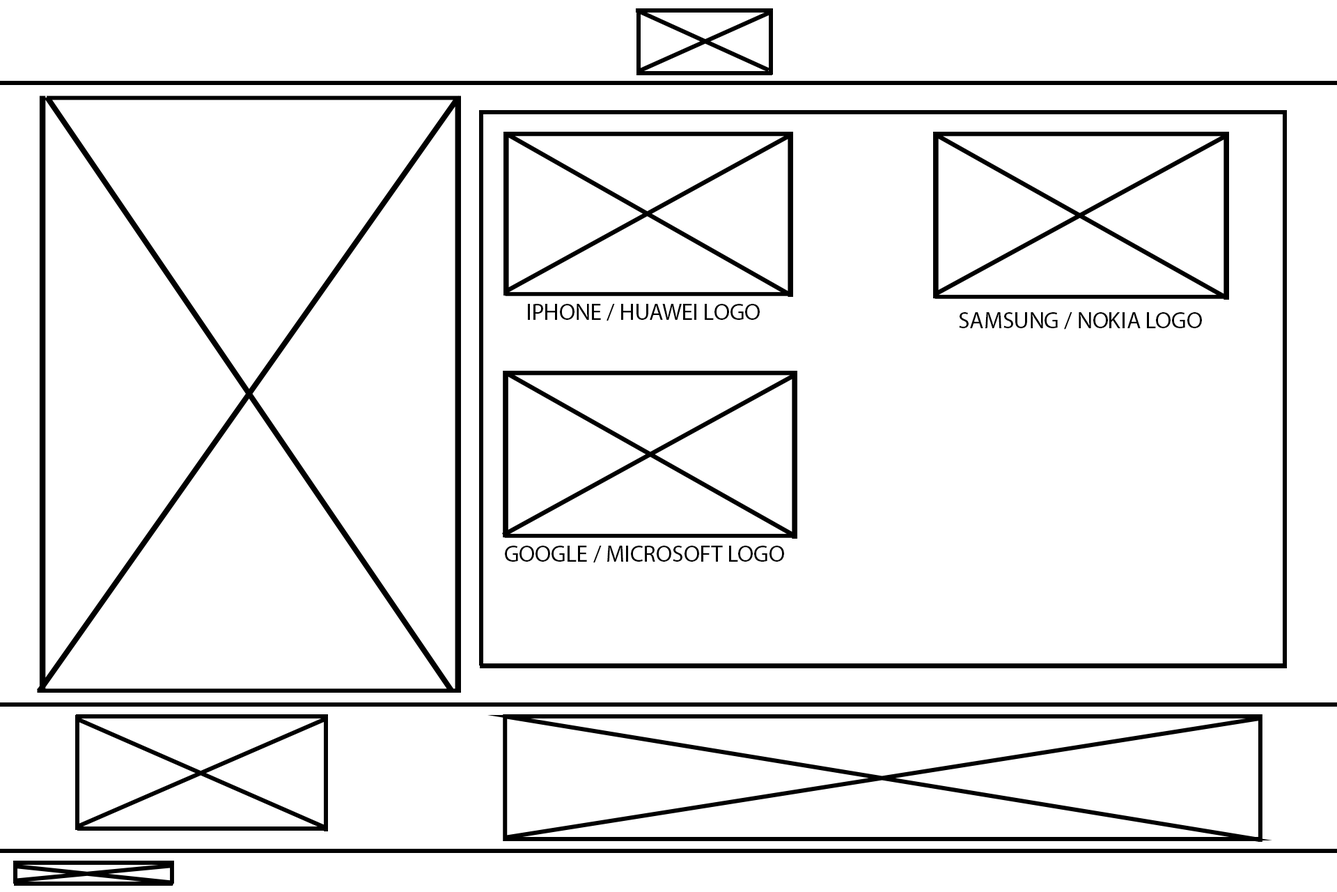
<style>
.page{position:relative;width:1337px;height:892px;background:#ffffff}
.page>*{position:absolute;margin:0}
.t1{font:23.2px "MyriadPro-Regular";color:#000000}
</style>
<div class="page">
<p class="t1" style="left:528px;top:304px;width:232px;height:17px">IPHONE / HUAWEI LOGO</p>
<p class="t1" style="left:959px;top:312px;width:243px;height:17px">SAMSUNG / NOKIA LOGO</p>
<p class="t1" style="left:505px;top:545px;width:279px;height:18px">GOOGLE / MICROSOFT LOGO</p>
</div>
